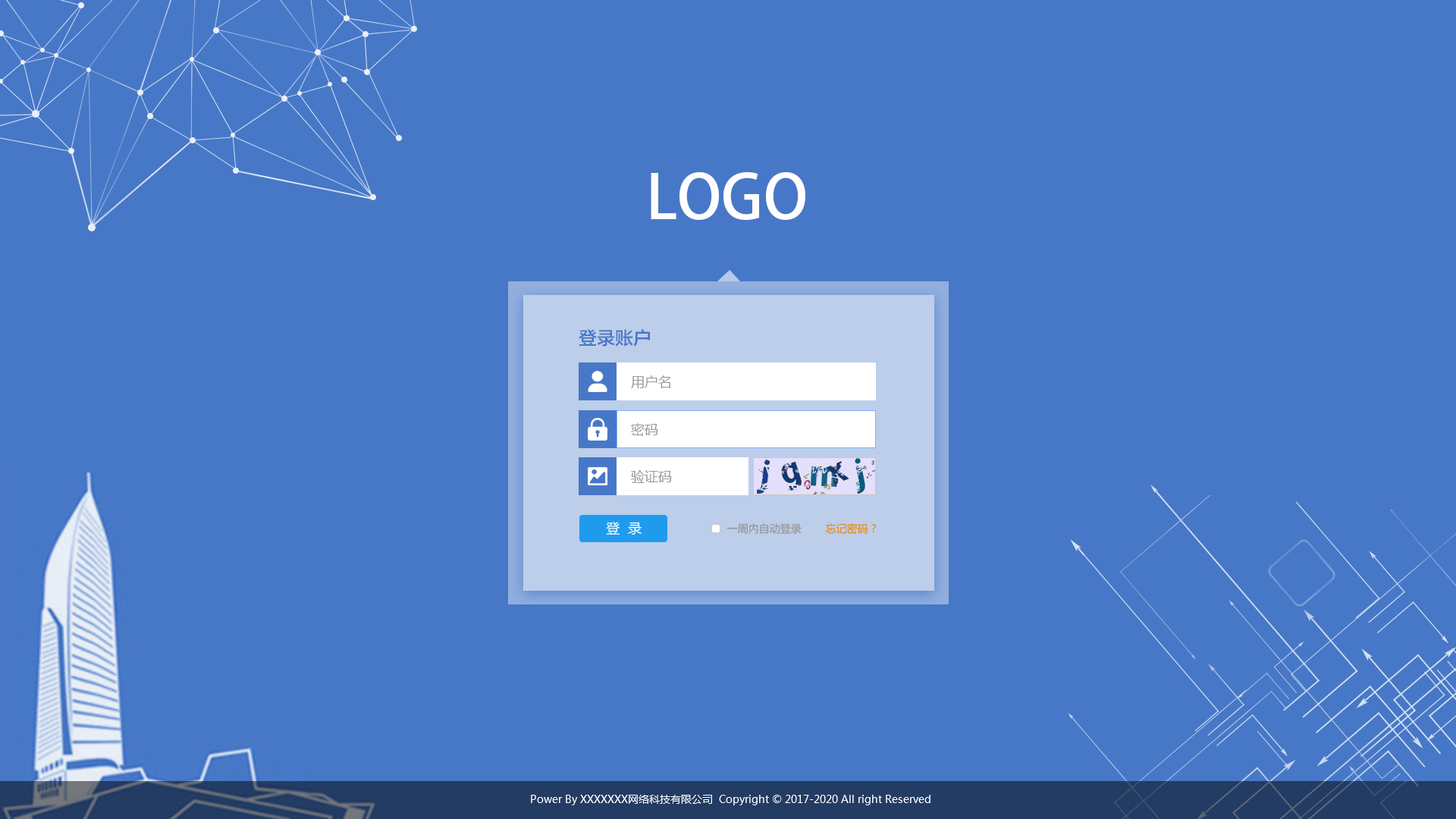
<style>
.page{position:relative;width:1456px;height:819px;background:#4778c7}
.page>*{position:absolute;margin:0}
.t1{font:60.6px "AdobeHeitiStd-Regular";color:#fffefe}
.t2{font:18.2px "FZLTZHK--GBK1-0";color:#4778c7}
.t3{font:13.6px "MicrosoftYaHei";color:#999999}
.t4{font:13.6px "MicrosoftYaHei";color:#ffffff}
.t5{font:10.6px "MicrosoftYaHei";color:#969696}
.t6{font:10.6px "MicrosoftYaHei";color:#ea8b15}
.t7{font:10.6px "MicrosoftYaHei";color:#ffffff}
</style>
<div class="page">
<p class="t1" style="left:651px;top:172px;width:154px;height:48px">LOGO</p>
<p class="t2" style="left:579px;top:329px;width:71px;height:18px">登录账户</p>
<p class="t3" style="left:631px;top:375px;width:40px;height:13px">用户名</p>
<p class="t3" style="left:631px;top:423px;width:27px;height:13px">密码</p>
<p class="t3" style="left:631px;top:470px;width:41px;height:13px">验证码</p>
<p class="t4" style="left:606px;top:522px;width:36px;height:13px">登  录</p>
<p class="t5" style="left:726px;top:523px;width:151px;height:11px">一周内自动登录        <span class="t6">忘记密码？</span></p>
<p class="t7" style="left:531px;top:795px;width:399px;height:10px">Power By XXXXXXX网络科技有限公司  Copyright © 2017-2020 All right Reserved</p>
</div>
